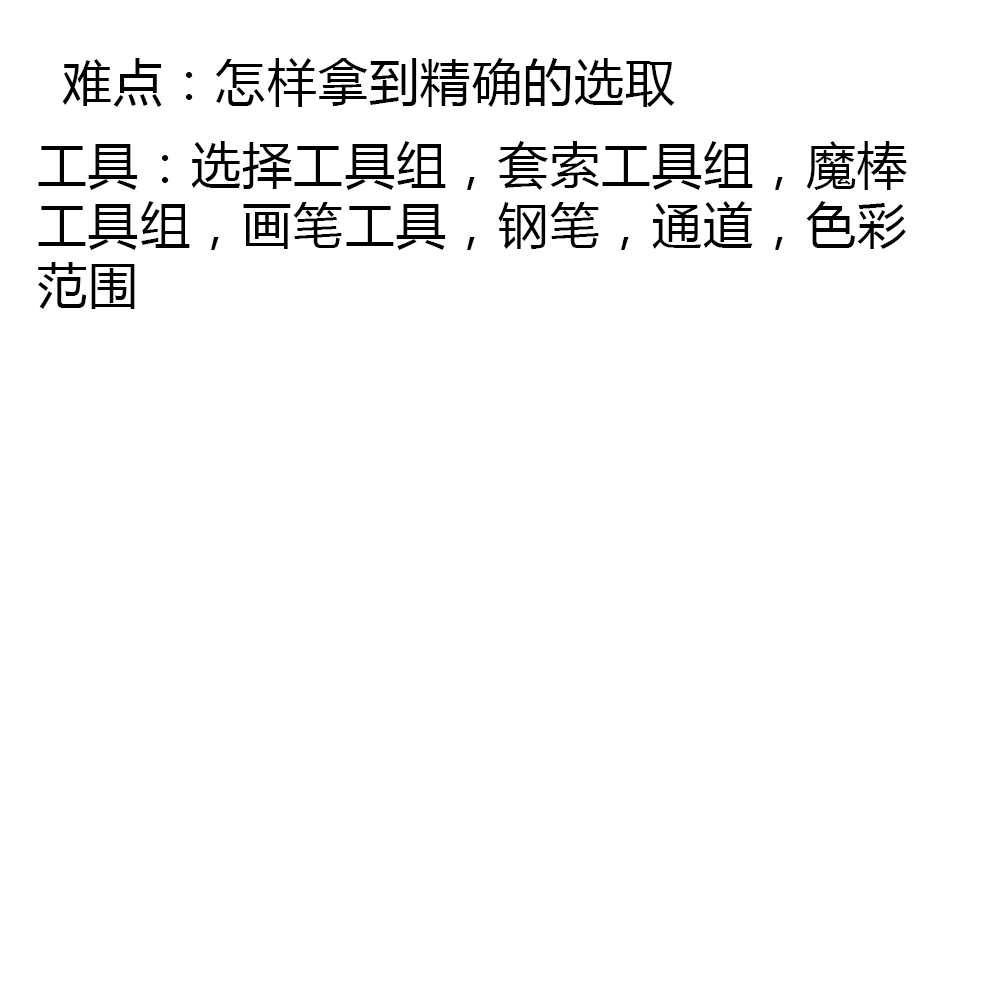
<style>
.page{position:relative;width:1000px;height:1000px;background:#ffffff}
.page>*{position:absolute;margin:0}
.t1{font:50px "MicrosoftYaHei";letter-spacing:0.025em;color:#000000}
.t2{font:50px/60px "MicrosoftYaHei";letter-spacing:0.025em;color:#000000}
</style>
<div class="page">
<p class="t1" style="left:62px;top:58px;width:613px;height:49px">难点：怎样拿到精确的选取</p>
<p class="t2" style="left:38px;top:141px;width:869px;height:168px">工具：选择工具组，套索工具组，魔棒工具组，画笔工具，钢笔，通道，色彩范围</p>
</div>
